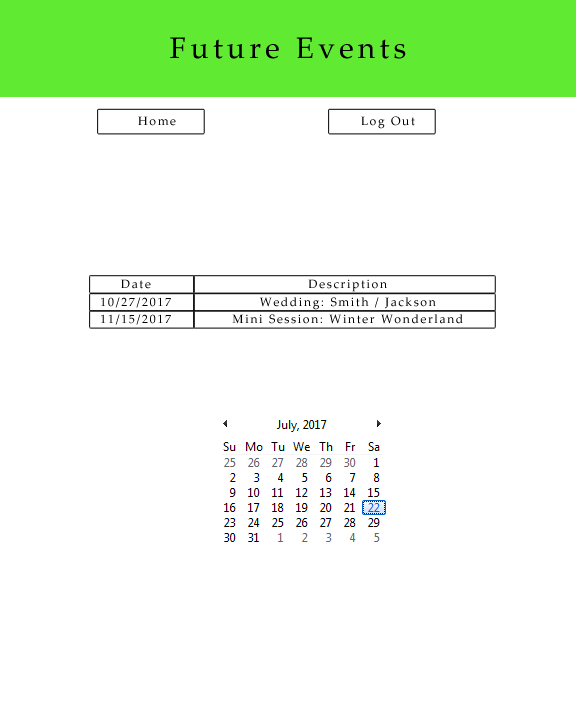
<style>
.page{position:relative;width:576px;height:720px;background:#ffffff}
.page>*{position:absolute;margin:0}
.t1{font:30px "PalatinoLinotype-Roman";letter-spacing:0.14em;color:#000000}
.t2{font:12px "PalatinoLinotype-Roman";letter-spacing:0.14em;color:#000000}
</style>
<div class="page">
<p class="t1" style="left:170px;top:37px;width:236px;height:22px">Future Events</p>
<p class="t2" style="left:138px;top:116px;width:38px;height:10px">Home</p>
<p class="t2" style="left:361px;top:116px;width:54px;height:13px">Log Out</p>
<p class="t2" style="left:121px;top:279px;width:30px;height:10px">Date</p>
<p class="t2" style="left:308px;top:279px;width:79px;height:13px">Description</p>
<p class="t2" style="left:101px;top:297px;width:70px;height:11px">10/27/2017</p>
<p class="t2" style="left:260px;top:297px;width:176px;height:13px">Wedding: Smith / Jackson</p>
<p class="t2" style="left:101px;top:314px;width:70px;height:11px">11/15/2017</p>
<p class="t2" style="left:232px;top:314px;width:231px;height:10px">Mini Session: Winter Wonderland</p>
</div>
